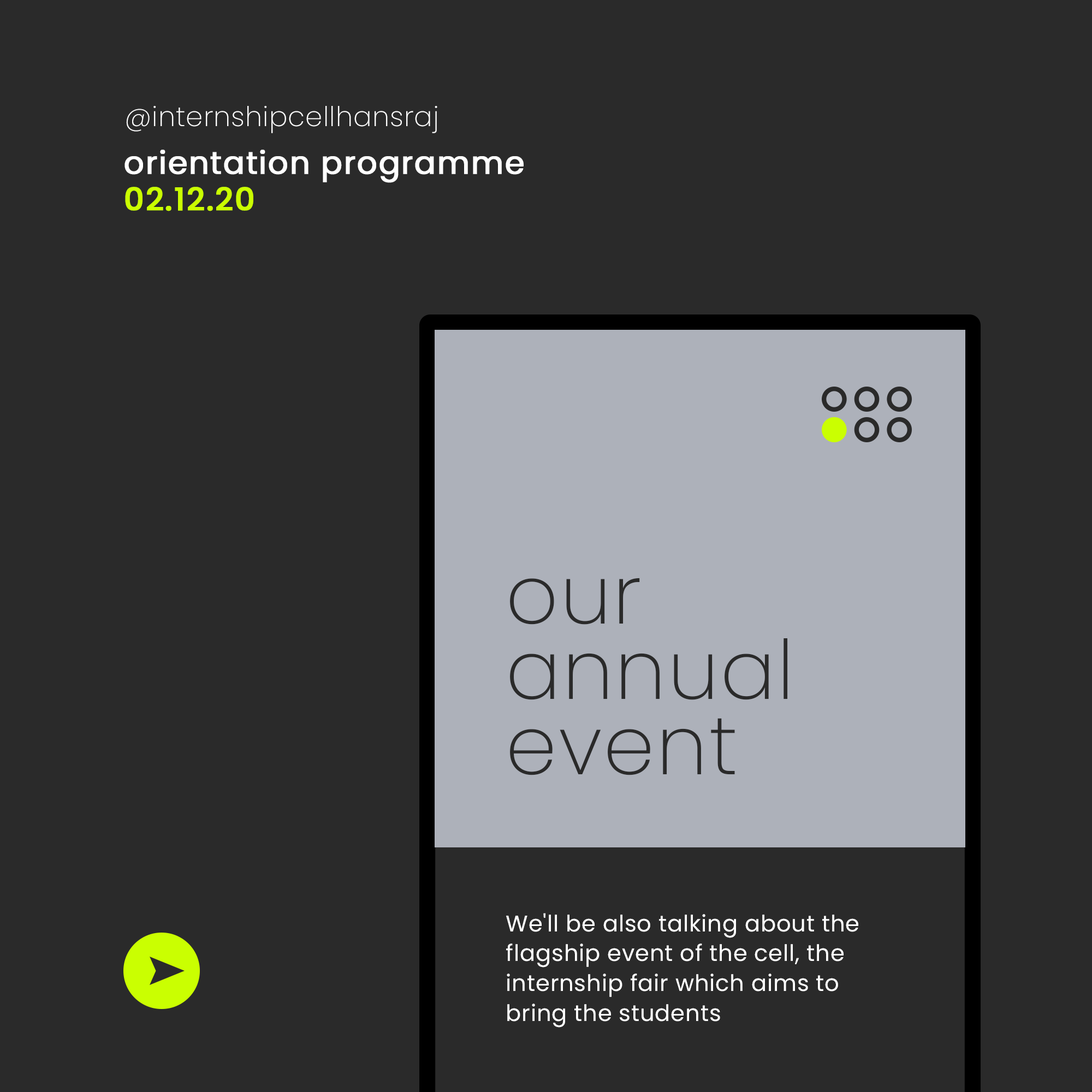
<style>
.page{position:relative;width:1092px;height:1092px;background:#2a2a2a}
.page>*{position:absolute;margin:0}
.t1{font:27.3px "Poppins-ExtraLight";letter-spacing:0.02em;color:#ffffff}
.t2{font:31.4px/36.6px "Poppins-Regular";letter-spacing:0.02em;color:#ffffff;font-weight:bold}
.t3{font:31.4px/36.6px "Poppins-Medium";letter-spacing:0.02em;color:#caff01;font-weight:bold}
.t4{font:81.9px/75.3px "Poppins-ExtraLight";letter-spacing:0.02em;color:#2a2a2a}
.t5{font:22.7px/29.8px "Poppins-Regular";letter-spacing:0.02em;color:#ffffff}
</style>
<div class="page">
<p class="t1" style="left:126px;top:106px;width:311px;height:27px">@internshipcellhansraj</p>
<p class="t2" style="left:124px;top:150px;width:400px;height:61px">orientation programme<br><span class="t3">02.12.20</span></p>
<p class="t4" style="left:510px;top:578px;width:278px;height:197px">our <br>annual <br>event</p>
<p class="t5" style="left:506px;top:913px;width:352px;height:115px">We'll be also talking about the flagship event of the cell, the <br>internship fair which aims to <br>bring the students<br>and companies closer.</p>
</div>
